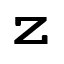
<style>
.page{position:relative;width:64px;height:64px;background:#ffffff}
.page>*{position:absolute;margin:0}
.t1{font:62px "CourierNewPSMT";letter-spacing:0.44em;color:#000000;font-weight:bold;scale:1.33 1}
</style>
<div class="page">
<p class="t1" style="left:14px;top:17px;width:34px;height:27px">z</p>
</div>
